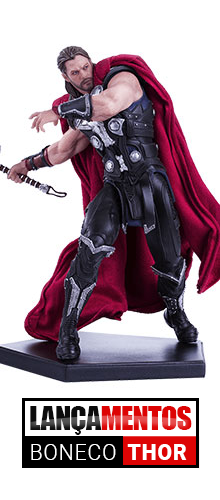
<style>
.page{position:relative;width:220px;height:500px;background:#ffffff}
.page>*{position:absolute;margin:0}
.t1{font:30px "Impact";letter-spacing:-0.025em;color:#dd0404;text-transform:uppercase}
.t2{font:30px "Impact";letter-spacing:-0.025em;color:#0c0c0c;text-transform:uppercase}
.t3{font:21.8px "Roboto-Light";color:#ffffff;text-transform:uppercase}
.t4{font:21.8px "Roboto-Black";color:#ffffff;text-transform:uppercase}
</style>
<div class="page">
<p class="t1" style="left:30px;top:406px;width:162px;height:29px"><span class="t2">lança</span>mentos</p>
<p class="t3" style="left:31px;top:444px;width:156px;height:16px">Boneco  <span class="t4">Thor</span></p>
</div>
